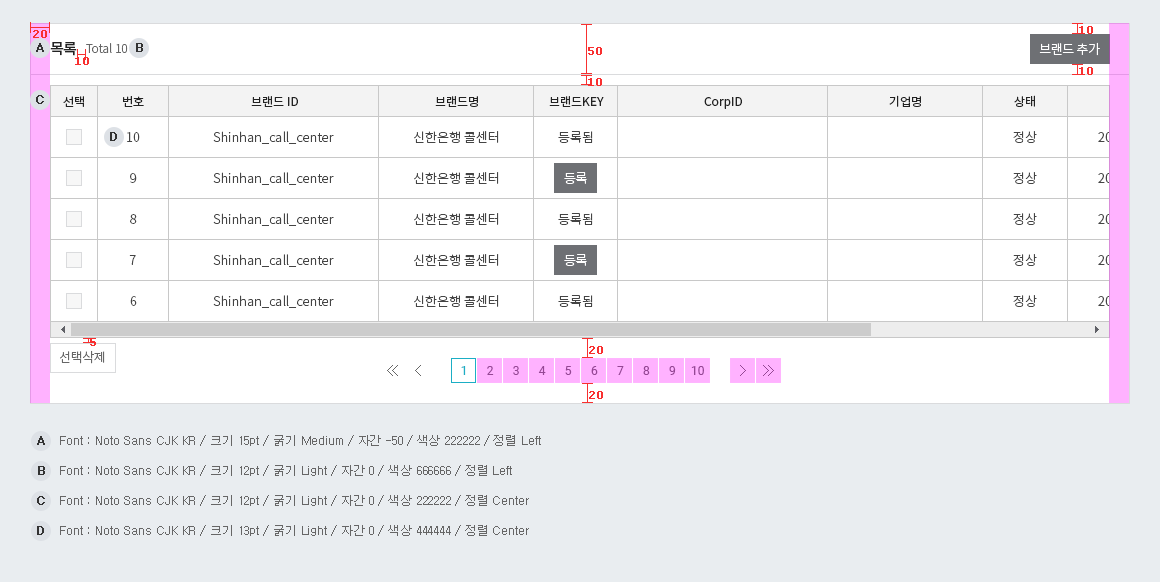
<style>
.page{position:relative;width:1160px;height:582px;background:#ffffff}
.page>*{position:absolute;margin:0}
.t1{font:11px "Verdana";color:#f83030;font-weight:bold}
.t2{font:15px "NotoSansCJKkr-Medium";letter-spacing:-0.05em;color:#222222}
.t3{font:12px "NotoSansCJKkr-Light";color:#666666}
.t4{font:13px "NotoSansCJKkr-Light";letter-spacing:-0.03em;color:#ffffff}
.t5{font:12px "NotoSansCJKkr-Regular";color:#222222}
.t6{font:13px "NotoSansCJKkr-Light";color:#444444}
.t7{font:13px "NotoSansCJKkr-Light";letter-spacing:-0.03em;color:#666666}
.t8{font:12px "Roboto-Regular";color:#1baec5}
.t9{font:12px "Roboto-Regular";color:#944794}
.t10{font:12px "Dotum";color:#323232;font-weight:bold}
.t11{font:12px "Dotum";color:#666666}
.t12{font:12px "Dotum";color:#323232;text-transform:uppercase;font-weight:bold}
</style>
<div class="page">
<p class="t1" style="left:33px;top:30px;width:14px;height:8px">20</p>
<p class="t1" style="left:1079px;top:26px;width:14px;height:8px">10</p>
<p class="t2" style="left:50px;top:42px;width:27px;height:14px">목록</p>
<p class="t3" style="left:86px;top:43px;width:42px;height:10px">Total 10</p>
<p class="t1" style="left:588px;top:47px;width:14px;height:8px">50</p>
<p class="t4" style="left:1039px;top:42px;width:61px;height:14px">브랜드 추가</p>
<p class="t1" style="left:75px;top:57px;width:14px;height:8px">10</p>
<p class="t1" style="left:588px;top:78px;width:14px;height:8px">10</p>
<p class="t5" style="left:63px;top:96px;width:21px;height:11px">선택</p>
<p class="t5" style="left:123px;top:96px;width:21px;height:11px">번호</p>
<p class="t5" style="left:251px;top:96px;width:47px;height:11px">브랜드 ID</p>
<p class="t5" style="left:435px;top:96px;width:43px;height:11px">브랜드명</p>
<p class="t5" style="left:549px;top:96px;width:55px;height:11px">브랜드KEY</p>
<p class="t5" style="left:704px;top:97px;width:38px;height:12px">CorpID</p>
<p class="t5" style="left:889px;top:95px;width:32px;height:12px">기업명</p>
<p class="t5" style="left:1014px;top:95px;width:21px;height:12px">상태</p>
<p class="t6" style="left:127px;top:132px;width:13px;height:10px">10</p>
<p class="t6" style="left:213px;top:131px;width:121px;height:13px">Shinhan_call_center</p>
<p class="t6" style="left:414px;top:131px;width:85px;height:12px">신한은행 콜센터</p>
<p class="t6" style="left:558px;top:131px;width:35px;height:12px">등록됨</p>
<p class="t6" style="left:1013px;top:131px;width:24px;height:12px">정상</p>
<p class="t6" style="left:130px;top:173px;width:7px;height:10px">9</p>
<p class="t6" style="left:213px;top:172px;width:121px;height:13px">Shinhan_call_center</p>
<p class="t6" style="left:414px;top:172px;width:85px;height:12px">신한은행 콜센터</p>
<p class="t4" style="left:564px;top:172px;width:23px;height:12px">등록</p>
<p class="t6" style="left:1013px;top:172px;width:24px;height:12px">정상</p>
<p class="t6" style="left:130px;top:214px;width:7px;height:10px">8</p>
<p class="t6" style="left:213px;top:213px;width:121px;height:13px">Shinhan_call_center</p>
<p class="t6" style="left:414px;top:213px;width:85px;height:12px">신한은행 콜센터</p>
<p class="t6" style="left:558px;top:213px;width:35px;height:12px">등록됨</p>
<p class="t6" style="left:1013px;top:213px;width:24px;height:12px">정상</p>
<p class="t6" style="left:129px;top:255px;width:7px;height:10px">7</p>
<p class="t6" style="left:213px;top:254px;width:121px;height:13px">Shinhan_call_center</p>
<p class="t6" style="left:414px;top:254px;width:85px;height:12px">신한은행 콜센터</p>
<p class="t4" style="left:564px;top:254px;width:23px;height:12px">등록</p>
<p class="t6" style="left:1013px;top:254px;width:24px;height:12px">정상</p>
<p class="t6" style="left:130px;top:296px;width:7px;height:10px">6</p>
<p class="t6" style="left:213px;top:295px;width:121px;height:13px">Shinhan_call_center</p>
<p class="t6" style="left:414px;top:295px;width:85px;height:12px">신한은행 콜센터</p>
<p class="t6" style="left:558px;top:295px;width:35px;height:12px">등록됨</p>
<p class="t6" style="left:1013px;top:295px;width:24px;height:12px">정상</p>
<p class="t1" style="left:90px;top:338px;width:6px;height:8px">5</p>
<p class="t7" style="left:60px;top:350px;width:45px;height:14px">선택삭제</p>
<p class="t1" style="left:589px;top:346px;width:14px;height:8px">20</p>
<p class="t8" style="left:461px;top:366px;width:5px;height:9px">1</p>
<p class="t9" style="left:487px;top:366px;width:7px;height:9px">2</p>
<p class="t9" style="left:513px;top:366px;width:6px;height:9px">3</p>
<p class="t9" style="left:538px;top:366px;width:8px;height:9px">4</p>
<p class="t9" style="left:565px;top:366px;width:7px;height:9px">5</p>
<p class="t9" style="left:591px;top:366px;width:7px;height:9px">6</p>
<p class="t9" style="left:617px;top:366px;width:7px;height:9px">7</p>
<p class="t9" style="left:643px;top:366px;width:7px;height:9px">8</p>
<p class="t9" style="left:669px;top:366px;width:7px;height:9px">9</p>
<p class="t9" style="left:691px;top:366px;width:13px;height:9px">10</p>
<p class="t1" style="left:589px;top:391px;width:14px;height:8px">20</p>
<p class="t10" style="left:37px;top:436px;width:8px;height:9px">A</p>
<p class="t11" style="left:60px;top:435px;width:481px;height:11px">Font : Noto Sans CJK KR / 크기 15pt / 굵기 Medium / 자간 -50 / 색상 222222 / 정렬 Left</p>
<p class="t10" style="left:38px;top:466px;width:7px;height:9px">B</p>
<p class="t11" style="left:60px;top:465px;width:452px;height:11px">Font : Noto Sans CJK KR / 크기 12pt / 굵기 Light / 자간 0 / 색상 666666 / 정렬 Left</p>
<p class="t12" style="left:37px;top:496px;width:8px;height:9px">c</p>
<p class="t11" style="left:60px;top:495px;width:469px;height:11px">Font : Noto Sans CJK KR / 크기 12pt / 굵기 Light / 자간 0 / 색상 222222 / 정렬 Center</p>
<p class="t12" style="left:37px;top:526px;width:7px;height:9px">d</p>
<p class="t11" style="left:60px;top:525px;width:469px;height:11px">Font : Noto Sans CJK KR / 크기 13pt / 굵기 Light / 자간 0 / 색상 444444 / 정렬 Center</p>
</div>
